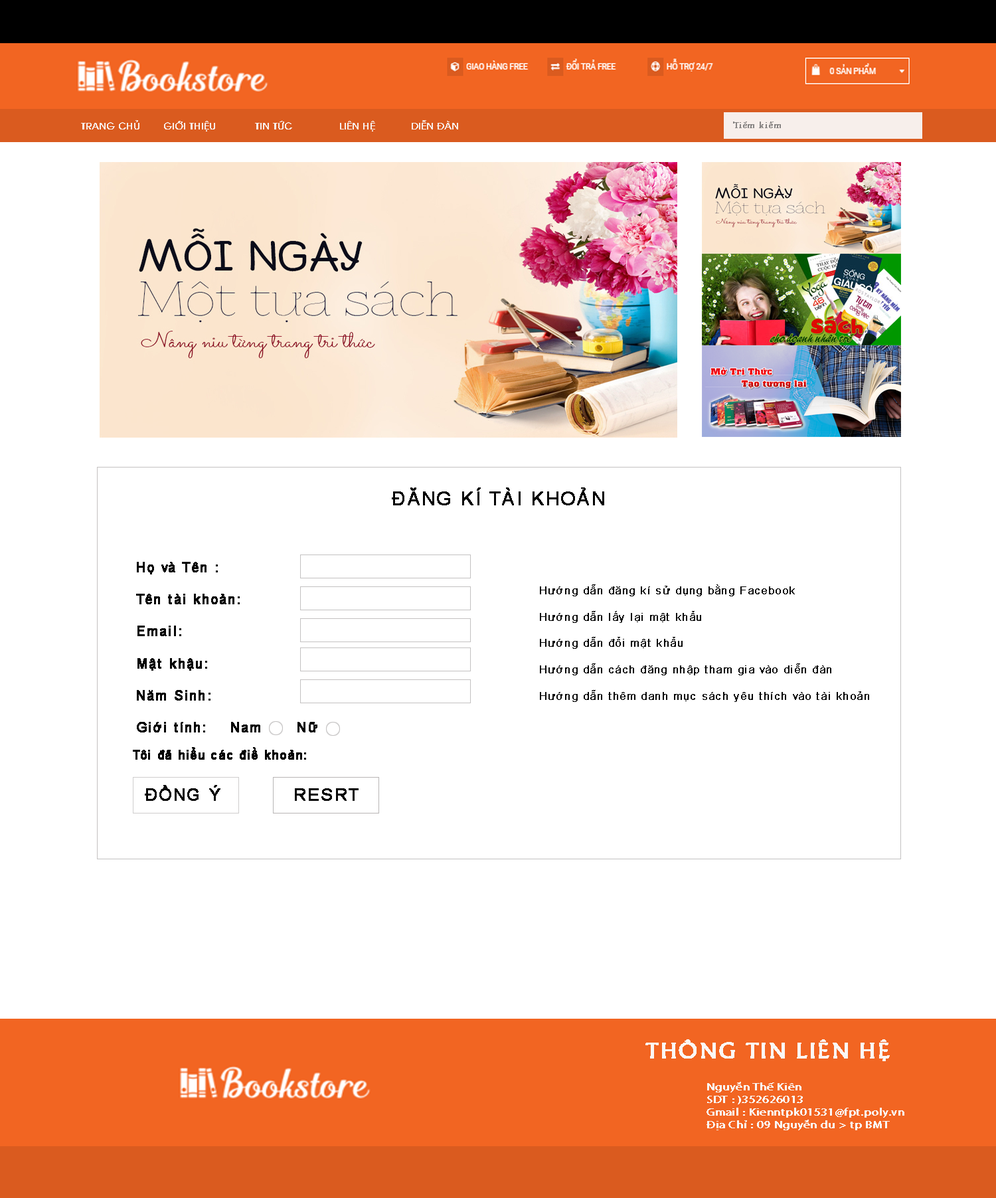
<style>
.page{position:relative;width:996px;height:1198px;background:#ffffff}
.page>*{position:absolute;margin:0}
.t1{font:9.3px "UTM-Avo";color:#f7eeea;font-weight:bold}
.t2{font:9.3px "VNI-Garam";color:#888584;font-weight:bold}
.t3{font:9.3px "MinionPro-Regular";color:#888584;font-weight:bold}
.t4{font:18.3px "ArialMT";letter-spacing:0.06em;color:#040404;font-weight:bold}
.t5{font:13.3px "ArialMT";letter-spacing:0.06em;color:#040404;font-weight:bold}
.t6{font:11px "ArialMT";letter-spacing:0.06em;color:#070707;font-weight:bold;scale:0.96 1}
.t7{font:12.4px "ArialMT";letter-spacing:0.06em;color:#040404;font-weight:bold;scale:0.96 1}
.t8{font:16.7px "ArialMT";letter-spacing:0.06em;color:#070707;font-weight:bold}
.t9{font:16.8px "ArialMT";letter-spacing:0.06em;color:#070707;font-weight:bold}
.t10{font:22.6px "UTM-Khuccamta";letter-spacing:0.025em;color:#faf7f6;font-weight:bold;scale:1.08 1}
.t11{font:10.5px "MyriadPro-Regular";letter-spacing:0.025em;color:#faf7f6;font-weight:bold;scale:1.14 1}
</style>
<div class="page">
<p class="t1" style="left:81px;top:120px;width:58px;height:9px">TRANG CHỦ</p>
<p class="t1" style="left:164px;top:121px;width:51px;height:10px">GIỚI THIỆU</p>
<p class="t1" style="left:255px;top:121px;width:37px;height:8px">TIN TỨC</p>
<p class="t1" style="left:340px;top:121px;width:35px;height:10px">LIÊN HỆ</p>
<p class="t1" style="left:412px;top:120px;width:46px;height:9px">DIỄN ĐÀN</p>
<p class="t2" style="left:733px;top:121px;width:48px;height:7px">Ti<span class="t3">ề</span>m ki<span class="t3">ế</span>m</p>
<p class="t4" style="left:392px;top:487px;width:212px;height:18px">ĐĂNG KÍ TÀI KHOẢN</p>
<p class="t5" style="left:136px;top:562px;width:181px;height:170px">Họ và Tên :<br><br>Tên tài khoản:<br><br>Email:<br><br>Mật khậu:<br><br>Năm Sinh:<br><br>Giới tính:    Nam      Nữ</p>
<p class="t6" style="left:540px;top:584px;width:329px;height:118px">Hướng dẫn đăng kí sử dụng bằng Facebook<br><br>Hướng dẫn lấy lại mật khẩu<br><br>Hướng dẫn đổi mật khẩu<br><br>Hướng dẫn cách đăng nhập tham gia vào diễn đàn<br><br>Hướng dẫn thêm danh mục sách yêu thích vào tài khoản</p>
<p class="t7" style="left:133px;top:747px;width:173px;height:12px">Tôi đã hiểu các điề khoản:</p>
<p class="t8" style="left:145px;top:785px;width:75px;height:16px">ĐỒNG Ý</p>
<p class="t9" style="left:295px;top:788px;width:63px;height:13px">RESRT</p>
<p class="t10" style="left:645px;top:1039px;width:245px;height:22px">THÔNG TIN LIÊN HỆ</p>
<p class="t11" style="left:706px;top:1081px;width:198px;height:49px">Nguyễn Thế Kiên <br>SDT : )352626013<br>Gmail : Kienntpk01531@fpt.poly.vn<br>Địa Chỉ : 09 Nguyễn du &gt; tp BMT</p>
</div>
